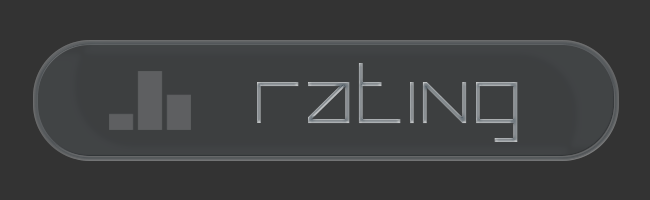
<style>
.page{position:relative;width:650px;height:200px;background:#333333}
.page>*{position:absolute;margin:0}
.t1{font:120px "AuricomRegular";letter-spacing:0.05em}
</style>
<div class="page">
<p class="t1" style="left:257px;top:63px;width:261px;height:79px">rating</p>
</div>
